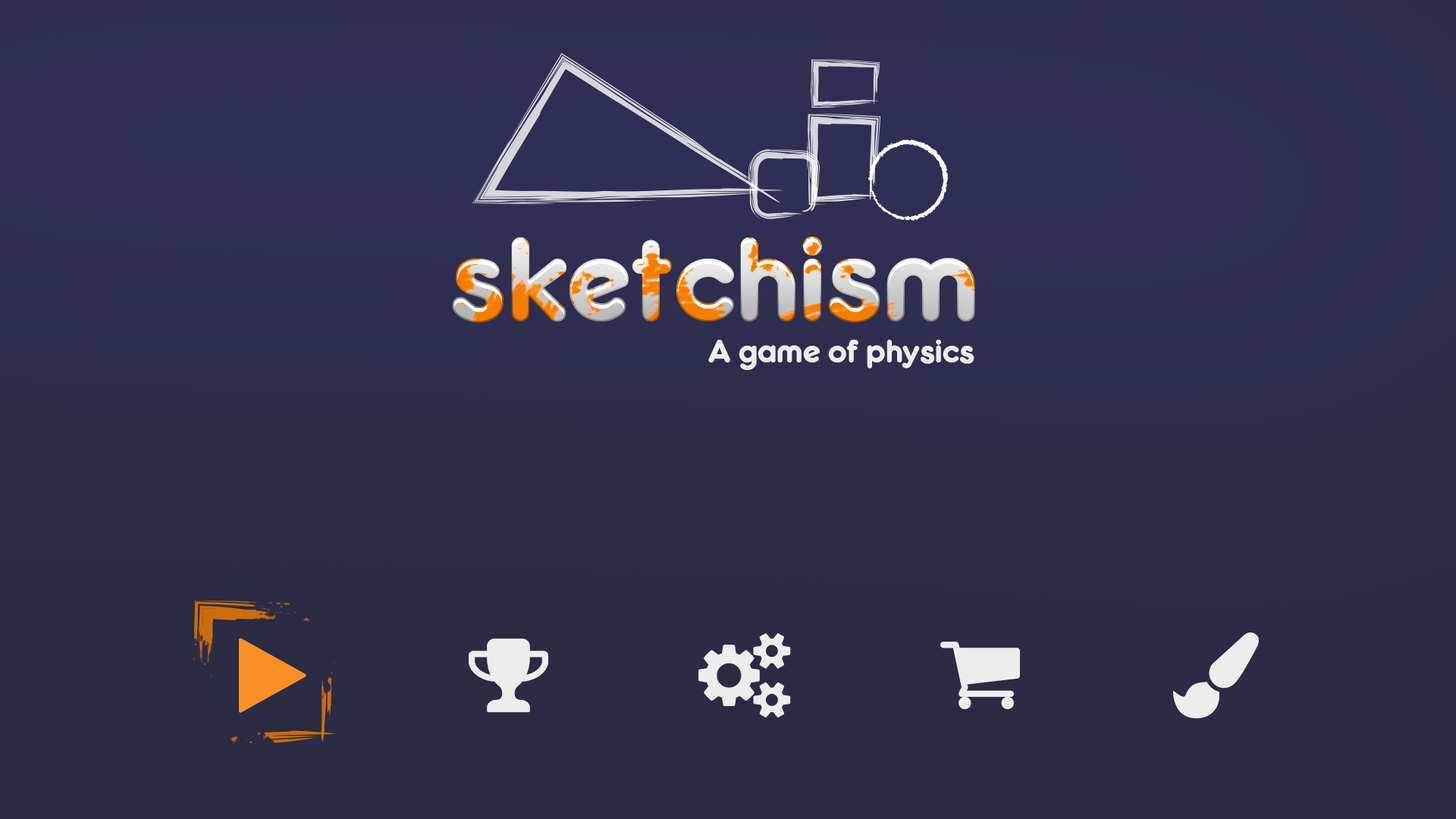
<style>
.page{position:relative;width:1456px;height:819px;background:#2b2b44}
.page>*{position:absolute;margin:0}
.t1{font:112.1px "RockoUltraFLF"}
.t2{font:30.5px "RockoUltraFLF";color:#ededed}
</style>
<div class="page">
<p class="t1" style="left:452px;top:237px;width:523px;height:86px">sketchism</p>
<p class="t2" style="left:708px;top:340px;width:266px;height:30px">A game of physics</p>
</div>
